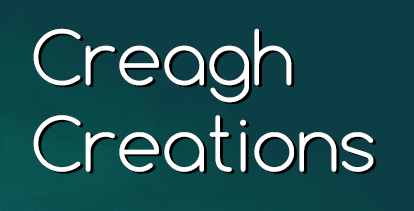
<style>
.page{position:relative;width:414px;height:211px;background:#0c3e45}
.page>*{position:absolute;margin:0}
.t1{font:72px "Comfortaa-Light";color:#ffffff}
.t2{font:72px "Comfortaa-Light"}
</style>
<div class="page">
<p class="t1" style="left:33px;top:28px;width:341px;height:144px">Creagh<br>Creations</p>
<p class="t2" style="left:36px;top:30px;width:341px;height:144px">Creagh<br>Creations</p>
</div>
